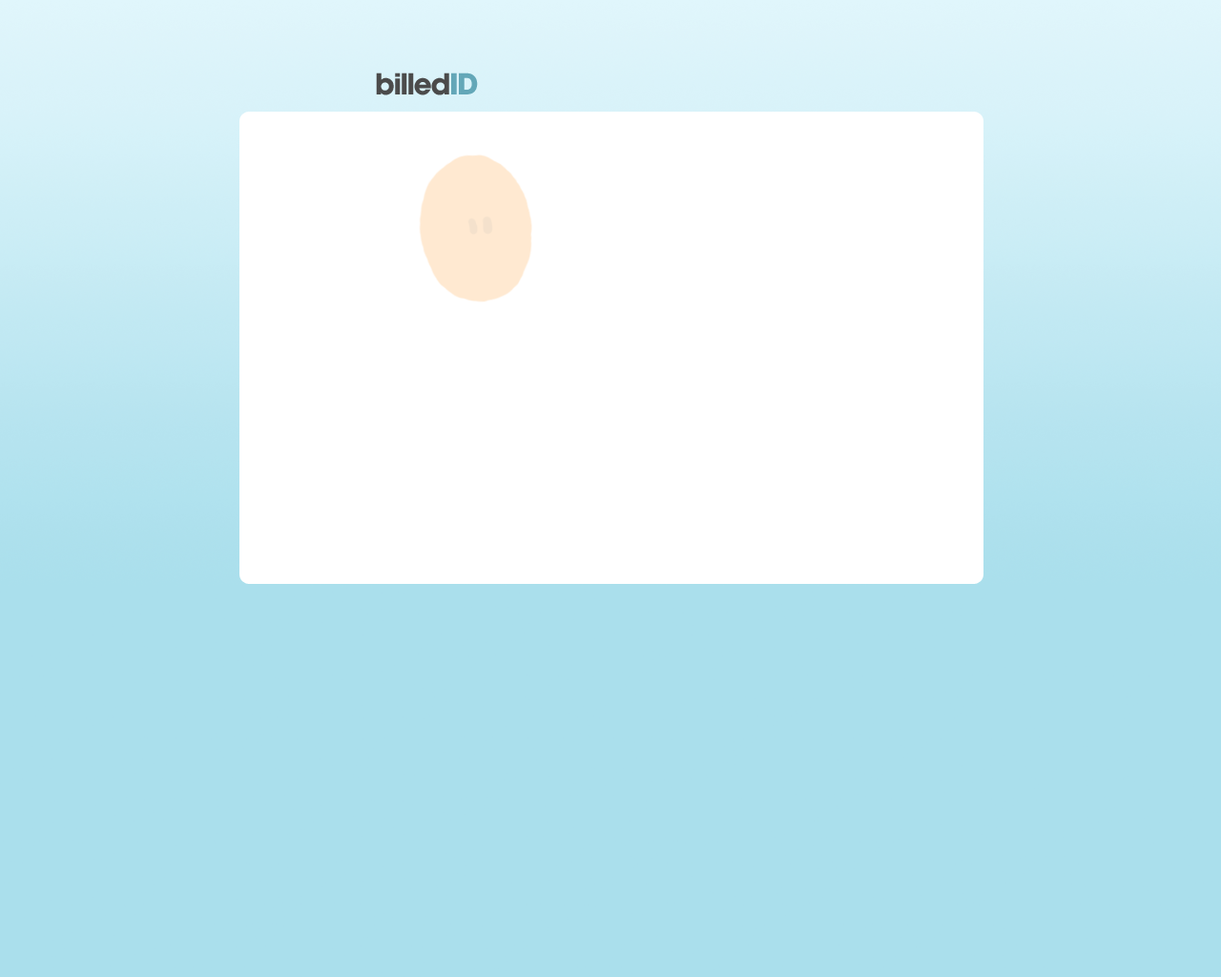
<style>
.page{position:relative;width:1221px;height:977px;background:#aadfec}
.page>*{position:absolute;margin:0}
.t1{font:28.6px "ITCAvantGardeStd-Bold";letter-spacing:-0.05em;color:#4b4b4b}
.t2{font:28.6px "ITCAvantGardeStd-Bold";letter-spacing:-0.05em;color:#63a7b8}
</style>
<div class="page">
<p class="t1" style="left:376px;top:72px;width:102px;height:23px">billed<span class="t2">ID</span></p>
</div>
